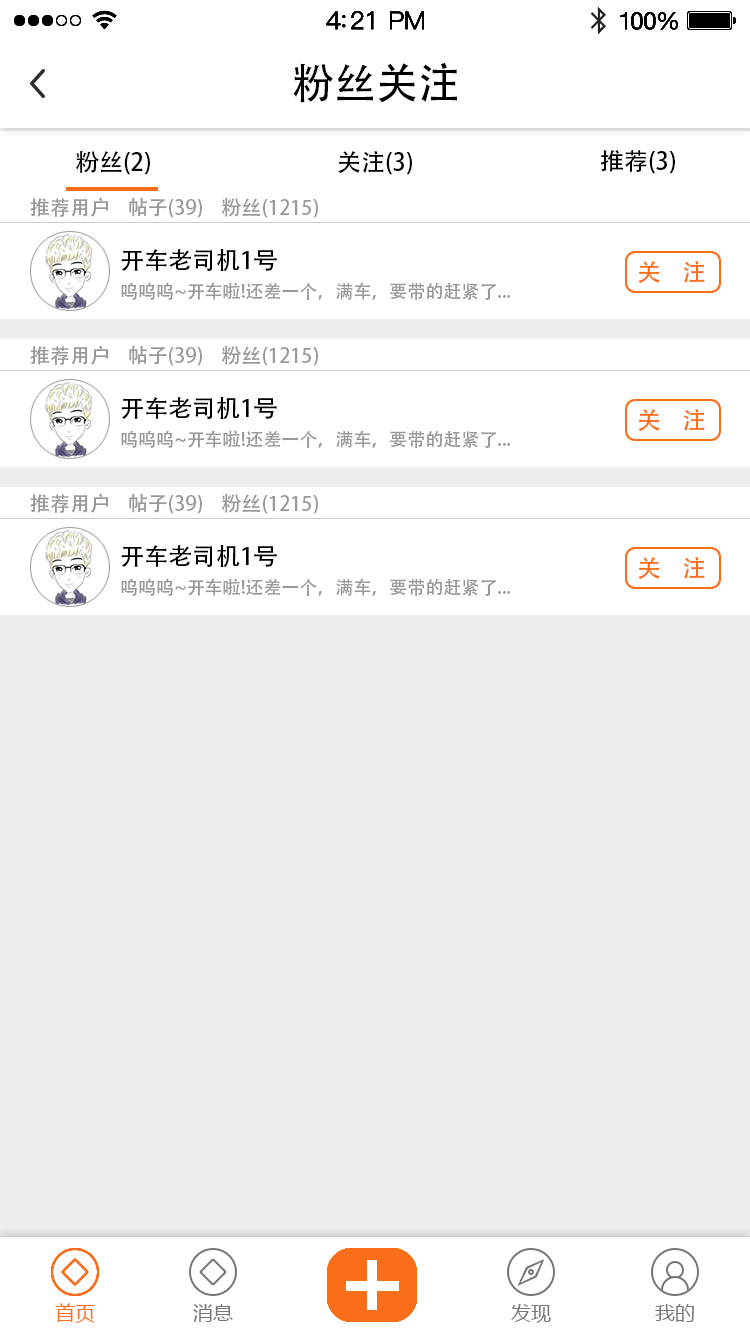
<style>
.page{position:relative;width:750px;height:1334px;background:#eeeeee}
.page>*{position:absolute;margin:0}
.t1{font:42px "AdobeHeitiStd-Regular";color:#000000}
.t2{font:24px "AdobeHeitiStd-Regular";color:#000000}
.t3{font:20px "AdobeHeitiStd-Regular";color:#999999}
.t4{font:24px "AdobeHeitiStd-Regular";color:#fb6e19}
.t5{font:18px "AdobeHeitiStd-Regular";color:#999999}
.t6{font:20px "MicrosoftYaHei";color:#fb6e19}
.t7{font:20px "MicrosoftYaHei";color:#777777}
</style>
<div class="page">
<p class="t1" style="left:293px;top:62px;width:164px;height:41px">粉丝关注</p>
<p class="t2" style="left:76px;top:150px;width:74px;height:25px">粉丝(2)</p>
<p class="t2" style="left:601px;top:150px;width:74px;height:24px">推荐(3)</p>
<p class="t2" style="left:338px;top:151px;width:74px;height:24px">关注(3)</p>
<p class="t3" style="left:30px;top:197px;width:288px;height:21px">推荐用户    帖子(39)    粉丝(1215)</p>
<p class="t2" style="left:121px;top:249px;width:156px;height:23px">开车老司机1号</p>
<p class="t4" style="left:638px;top:261px;width:67px;height:23px">关    注</p>
<p class="t5" style="left:121px;top:282px;width:389px;height:18px">呜呜呜~开车啦!还差一个，满车，要带的赶紧了...</p>
<p class="t3" style="left:30px;top:345px;width:288px;height:21px">推荐用户    帖子(39)    粉丝(1215)</p>
<p class="t2" style="left:121px;top:397px;width:156px;height:23px">开车老司机1号</p>
<p class="t4" style="left:638px;top:409px;width:67px;height:23px">关    注</p>
<p class="t5" style="left:121px;top:430px;width:389px;height:18px">呜呜呜~开车啦!还差一个，满车，要带的赶紧了...</p>
<p class="t3" style="left:30px;top:493px;width:288px;height:21px">推荐用户    帖子(39)    粉丝(1215)</p>
<p class="t2" style="left:121px;top:545px;width:156px;height:23px">开车老司机1号</p>
<p class="t4" style="left:638px;top:557px;width:67px;height:23px">关    注</p>
<p class="t5" style="left:121px;top:578px;width:389px;height:18px">呜呜呜~开车啦!还差一个，满车，要带的赶紧了...</p>
<p class="t6" style="left:55px;top:1303px;width:40px;height:20px">首页</p>
<p class="t7" style="left:193px;top:1304px;width:40px;height:18px">消息</p>
<p class="t7" style="left:511px;top:1304px;width:40px;height:19px">发现</p>
<p class="t7" style="left:655px;top:1304px;width:39px;height:18px">我的</p>
</div>
